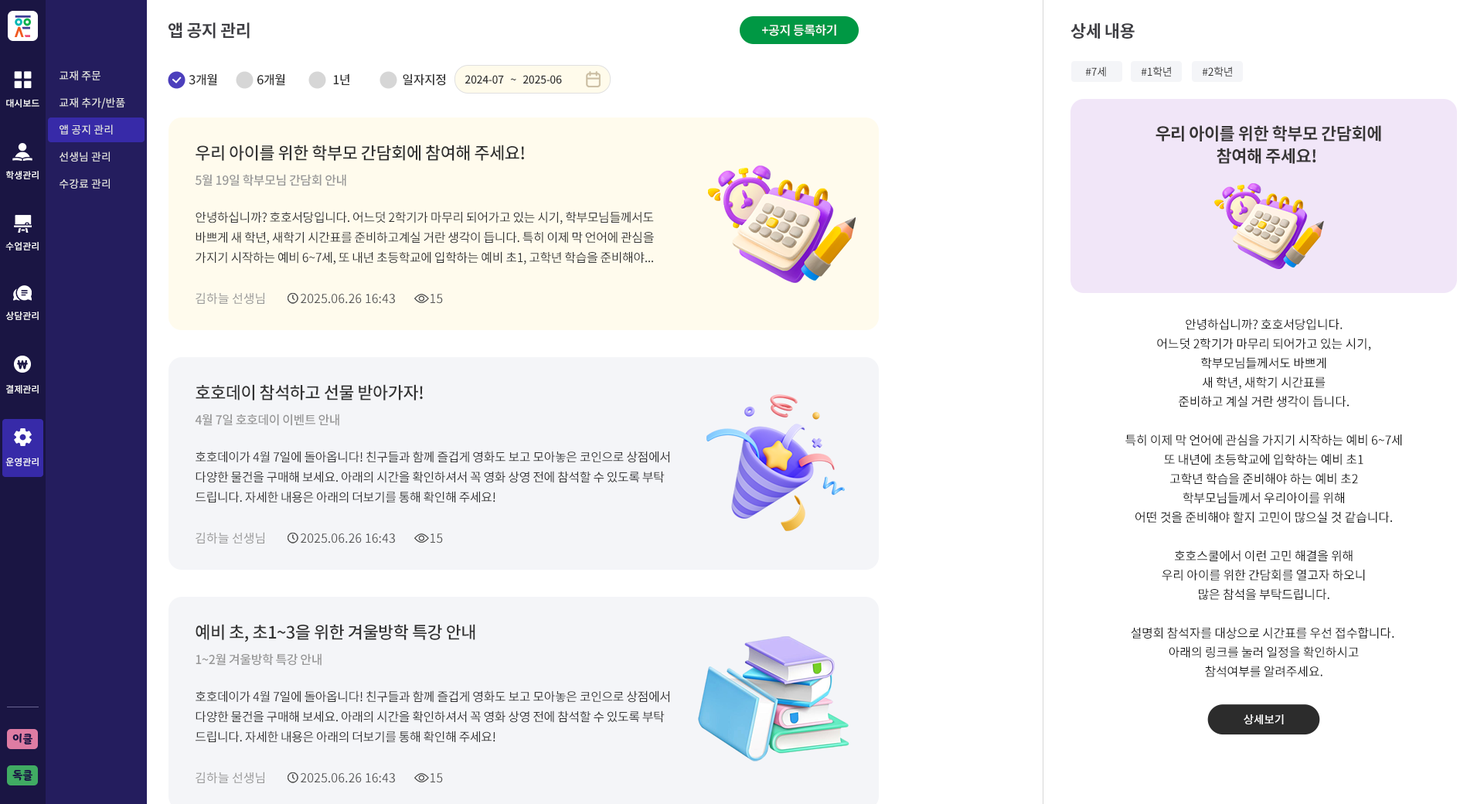
<style>
.page{position:relative;width:1484px;height:804px;background:#ffffff}
.page>*{position:absolute;margin:0}
.t1{font:17px "NotoSansCJKkr-Bold";letter-spacing:-0.025em;color:#3e3e43;text-transform:uppercase}
.t2{font:12.4px "NotoSansCJKkr-Medium";letter-spacing:-0.025em;color:#ffffff}
.t3{font:10.8px/27px "NotoSansCJKkr-Medium";color:#e1e1e1}
.t4{font:12.4px "NotoSansCJKkr-Medium";letter-spacing:-0.025em;color:#323232}
.t5{font:10.8px "NotoSansCJKkr-Medium";letter-spacing:-0.025em;color:#323232}
.t6{font:10.8px "NotoSansCJKkr-Regular";letter-spacing:-0.025em;color:#323232}
.t7{font:9.3px "NotoSansCJKkr-Medium";color:#ffffff}
.t8{font:17px/22.4px "NotoSansCJKkr-Bold";letter-spacing:-0.025em;color:#383636}
.t9{font:17px "NotoSansCJKkr-Medium";letter-spacing:-0.025em;color:#323232}
.t10{font:12.4px "NotoSansCJKkr-Medium";letter-spacing:-0.025em;color:#979797}
.t11{font:12.4px/20.1px "NotoSansCJKkr-Regular";letter-spacing:-0.025em;color:#323232}
.t12{font:12.4px "NotoSansCJKkr-Regular";color:#979797}
.t13{font:12.4px "NotoSansCJKkr-Regular";color:#545454}
.t14{font:12.4px/19.3px "NotoSansCJKkr-Regular";letter-spacing:-0.01em;color:#1a1a1a}
.t15{font:11.3px "NotoSansCJKkr-Medium";letter-spacing:-0.01em;color:#ffffff}
.t16{font:10.8px "YoonSoftSlime";color:#1a1543}
</style>
<div class="page">
<p class="t1" style="left:168px;top:22px;width:82px;height:17px">앱 공지 관리</p>
<p class="t2" style="left:762px;top:24px;width:74px;height:12px">+공지 등록하기</p>
<p class="t1" style="left:1070px;top:23px;width:64px;height:16px">상세 내용</p>
<p class="t3" style="left:60px;top:70px;width:65px;height:119px">교재 주문<br>교재 추가/반품<br>앱 공지 관리<br>선생님 관리<br>수강료 관리</p>
<p class="t4" style="left:189px;top:73px;width:28px;height:13px">3개월</p>
<p class="t4" style="left:257px;top:73px;width:28px;height:13px">6개월</p>
<p class="t4" style="left:333px;top:73px;width:16px;height:12px">1년</p>
<p class="t4" style="left:403px;top:73px;width:43px;height:13px">일자지정</p>
<p class="t5" style="left:464px;top:75px;width:98px;height:9px">2024-07   ~   2025-06</p>
<p class="t6" style="left:1085px;top:66px;width:21px;height:11px">#7세</p>
<p class="t6" style="left:1141px;top:66px;width:30px;height:11px">#1학년</p>
<p class="t6" style="left:1202px;top:66px;width:30px;height:11px">#2학년</p>
<p class="t7" style="left:6px;top:99px;width:33px;height:8px">대시보드</p>
<p class="t8" style="left:1155px;top:125px;width:226px;height:39px;text-align:center">우리 아이를 위한 학부모 간담회에<br>참여해 주세요!</p>
<p class="t9" style="left:196px;top:145px;width:328px;height:16px">우리 아이를 위한 학부모 간담회에 참여해 주세요!</p>
<p class="t7" style="left:6px;top:171px;width:33px;height:8px">학생관리</p>
<p class="t10" style="left:195px;top:174px;width:151px;height:12px">5월 19일 학부모님 간담회 안내</p>
<p class="t11" style="left:196px;top:211px;width:458px;height:53px">안녕하십니까? 호호서당입니다. 어느덧 2학기가 마무리 되어가고 있는 시기, 학부모님들께서도 <br>바쁘게 새 학년, 새학기 시간표를 준비하고계실 거란 생각이 듭니다. 특히 이제 막 언어에 관심을 <br>가지기 시작하는 예비 6~7세, 또 내년 초등학교에 입학하는 예비 초1, 고학년 학습을 준비해야...</p>
<p class="t7" style="left:5px;top:242px;width:34px;height:8px">수업관리</p>
<p class="t12" style="left:196px;top:292px;width:68px;height:12px">김하늘 선생님</p>
<p class="t13" style="left:301px;top:294px;width:94px;height:10px">2025.06.26 16:43</p>
<p class="t13" style="left:430px;top:294px;width:13px;height:10px">15</p>
<p class="t7" style="left:5px;top:311px;width:34px;height:9px">상담관리</p>
<p class="t14" style="left:1125px;top:318px;width:277px;height:359px;text-align:center">안녕하십니까? 호호서당입니다.<br>어느덧 2학기가 마무리 되어가고 있는 시기,<br>학부모님들께서도 바쁘게<br>새 학년, 새학기 시간표를<br>준비하고 계실 거란 생각이 듭니다.<br><br>특히 이제 막 언어에 관심을 가지기 시작하는 예비 6~7세<br>또 내년에 초등학교에 입학하는 예비 초1<br>고학년 학습을 준비해야 하는 예비 초2<br>학부모님들께서 우리아이를 위해<br>어떤 것을 준비해야 할지 고민이 많으실 것 같습니다.<br><br>호호스쿨에서 이런 고민 해결을 위해<br>우리 아이를 위한 간담회를 열고자 하오니<br>많은 참석을 부탁드립니다.<br><br>설명회 참석자를 대상으로 시간표를 우선 접수합니다. <br>아래의 링크를 눌러 일정을 확인하시고<br>참석여부를 알려주세요.</p>
<p class="t7" style="left:6px;top:385px;width:33px;height:8px">결제관리</p>
<p class="t9" style="left:196px;top:384px;width:227px;height:16px">호호데이 참석하고 선물 받아가자!</p>
<p class="t10" style="left:195px;top:413px;width:144px;height:13px">4월 7일 호호데이 이벤트 안내</p>
<p class="t7" style="left:5px;top:457px;width:34px;height:9px">운영관리</p>
<p class="t11" style="left:196px;top:451px;width:473px;height:52px">호호데이가 4월 7일에 돌아옵니다! 친구들과 함께 즐겁게 영화도 보고 모아놓은 코인으로 상점에서 <br>다양한 물건을 구매해 보세요. 아래의 시간을 확인하셔서 꼭 영화 상영 전에 참석할 수 있도록 부탁<br>드립니다. 자세한 내용은 아래의 더보기를 통해 확인해 주세요!</p>
<p class="t12" style="left:196px;top:532px;width:68px;height:12px">김하늘 선생님</p>
<p class="t13" style="left:301px;top:533px;width:94px;height:10px">2025.06.26 16:43</p>
<p class="t13" style="left:430px;top:533px;width:13px;height:10px">15</p>
<p class="t9" style="left:196px;top:624px;width:279px;height:18px">예비 초, 초1~3을 위한 겨울방학 특강 안내</p>
<p class="t10" style="left:196px;top:653px;width:125px;height:12px">1~2월 겨울방학 특강 안내</p>
<p class="t11" style="left:196px;top:690px;width:473px;height:53px">호호데이가 4월 7일에 돌아옵니다! 친구들과 함께 즐겁게 영화도 보고 모아놓은 코인으로 상점에서 <br>다양한 물건을 구매해 보세요. 아래의 시간을 확인하셔서 꼭 영화 상영 전에 참석할 수 있도록 부탁<br>드립니다. 자세한 내용은 아래의 더보기를 통해 확인해 주세요!</p>
<p class="t15" style="left:1243px;top:714px;width:41px;height:10px">상세보기</p>
<p class="t16" style="left:12px;top:733px;width:20px;height:11px">이클</p>
<p class="t16" style="left:12px;top:770px;width:20px;height:10px">독클</p>
<p class="t12" style="left:196px;top:771px;width:68px;height:13px">김하늘 선생님</p>
<p class="t13" style="left:301px;top:773px;width:94px;height:10px">2025.06.26 16:43</p>
<p class="t13" style="left:430px;top:773px;width:13px;height:10px">15</p>
</div>
